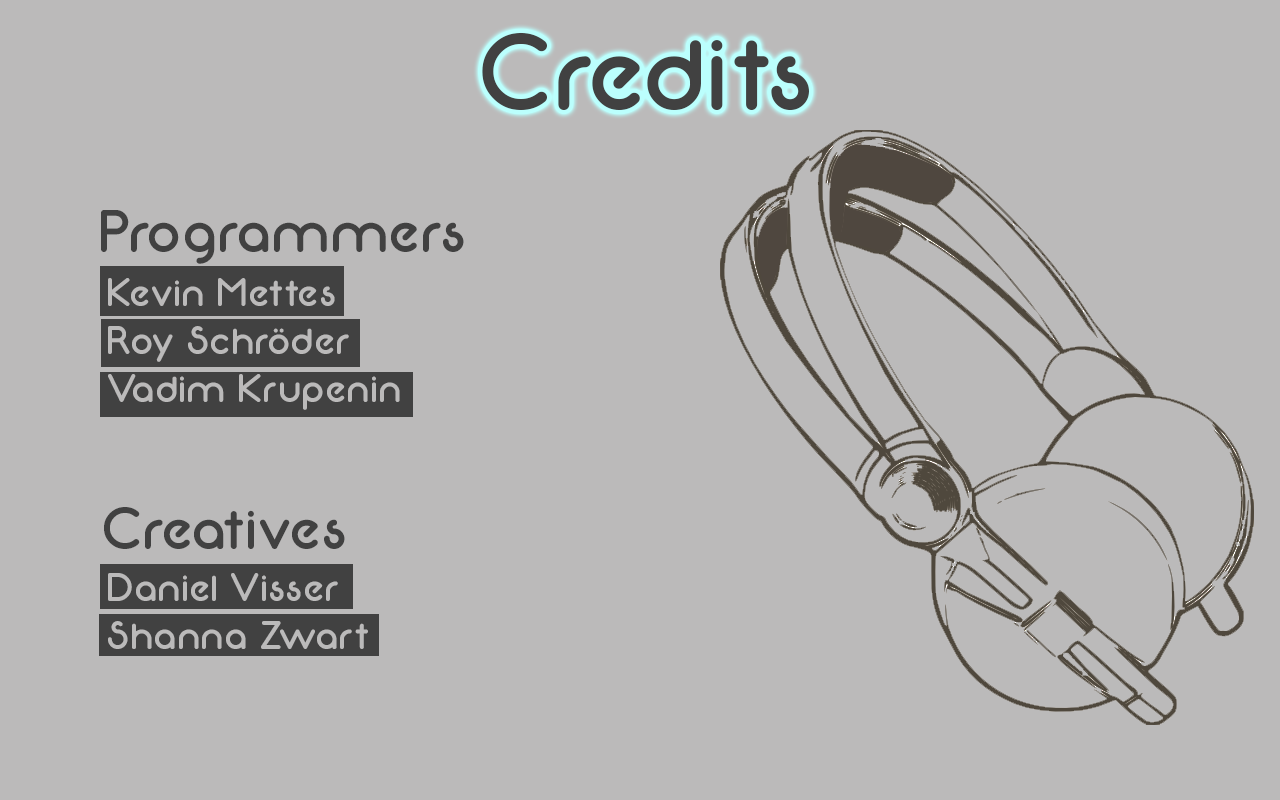
<style>
.page{position:relative;width:1280px;height:800px;background:#bbbaba}
.page>*{position:absolute;margin:0}
.t1{font:110px "Neon80s";color:#414141}
.t2{font:60px "Neon80s";color:#414141}
.t3{font:40px "Neon80s";color:#bbbaba}
</style>
<div class="page">
<p class="t1" style="left:482px;top:32px;width:327px;height:78px">Credits</p>
<p class="t2" style="left:101px;top:210px;width:363px;height:54px">Programmers</p>
<p class="t3" style="left:108px;top:278px;width:292px;height:132px"><span class="t2"><br></span>Kevin Mettes<br>Roy Schröder<br>Vadim Krupenin</p>
<p class="t2" style="left:104px;top:507px;width:241px;height:42px">Creatives</p>
<p class="t3" style="left:108px;top:573px;width:260px;height:76px">Daniel Visser<br>Shanna Zwart</p>
</div>
